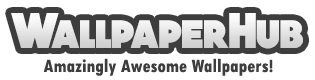
<style>
.page{position:relative;width:315px;height:80px;background:#ffffff}
.page>*{position:absolute;margin:0}
.t1{font:48px "QUARTZO-Bold";color:#e3e3e3}
.t2{font:20px "TwCenMT-CondensedBold";color:#3d3d3d}
</style>
<div class="page">
<p class="t1" style="left:11px;top:13px;width:292px;height:36px">WallpaperHub</p>
<p class="t2" style="left:43px;top:58px;width:230px;height:18px">Amazingly Awesome Wallpapers!</p>
</div>
